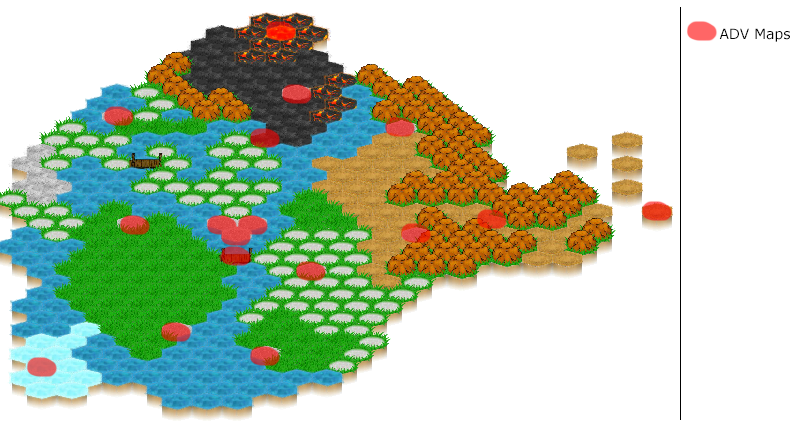
<style>
.page{position:relative;width:800px;height:431px;background:#ffffff}
.page>*{position:absolute;margin:0}
.t1{font:14px "Verdana";color:#000000}
</style>
<div class="page">
<p class="t1" style="left:719px;top:28px;width:71px;height:14px">ADV Maps</p>
</div>
